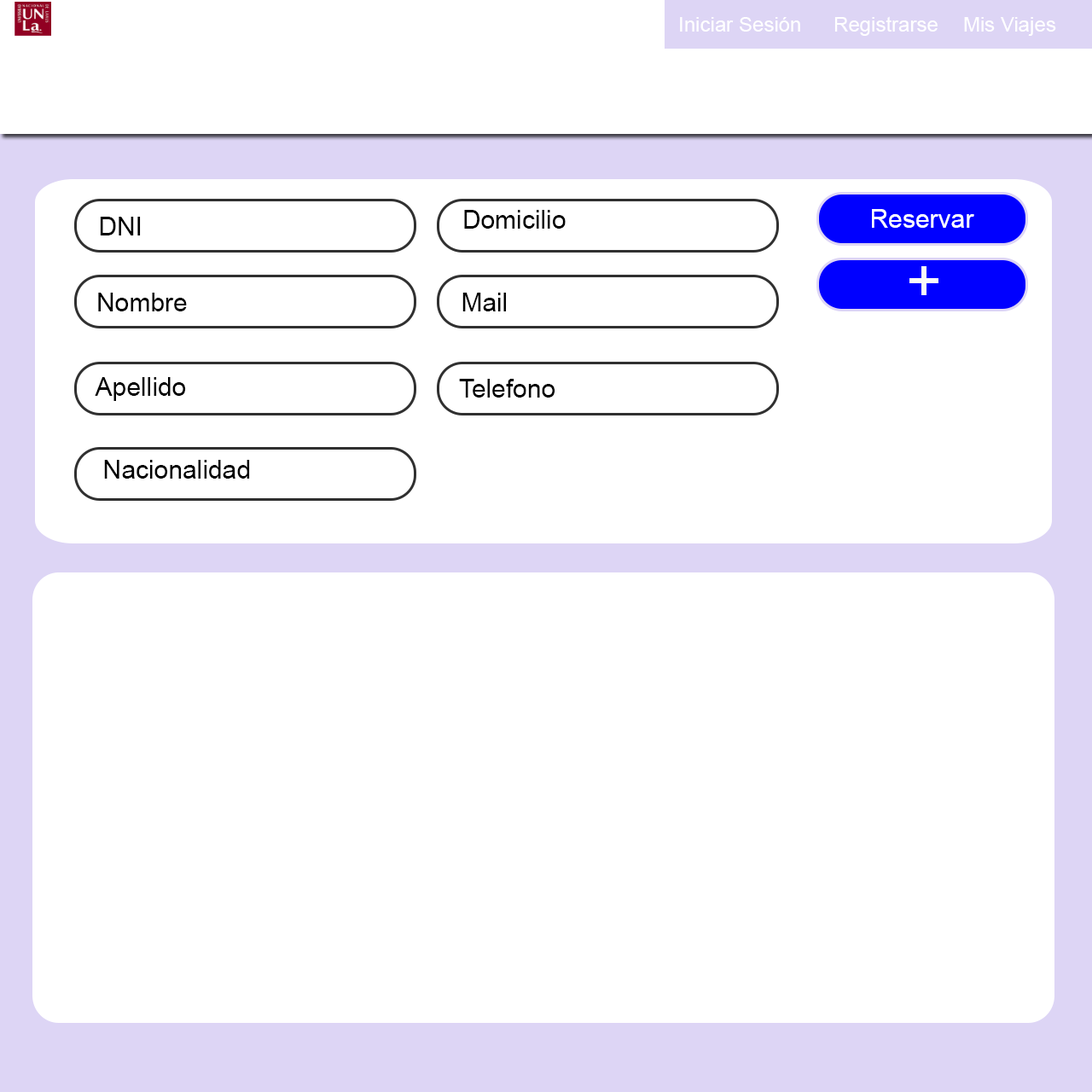
<style>
.page{position:relative;width:1092px;height:1092px;background:#ffffff}
.page>*{position:absolute;margin:0}
.t1{font:20.5px "ArialMT";color:#ffffff}
.t2{font:25.6px "ArialMT";color:#000000}
.t3{font:25.6px "ArialMT";color:#ffffff}
.t4{font:61.4px "ArialMT";color:#f9f9f9}
</style>
<div class="page">
<p class="t1" style="left:680px;top:17px;width:120px;height:15px">Iniciar Sesión</p>
<p class="t1" style="left:834px;top:16px;width:104px;height:20px">Registrarse</p>
<p class="t1" style="left:964px;top:17px;width:92px;height:19px">Mis Viajes</p>
<p class="t2" style="left:464px;top:210px;width:102px;height:19px">Domicilio</p>
<p class="t3" style="left:872px;top:209px;width:102px;height:19px">Reservar</p>
<p class="t2" style="left:100px;top:217px;width:41px;height:18px">DNI</p>
<p class="t4" style="left:909px;top:266px;width:29px;height:29px">+</p>
<p class="t2" style="left:98px;top:293px;width:89px;height:18px">Nombre</p>
<p class="t2" style="left:462px;top:293px;width:44px;height:18px">Mail</p>
<p class="t2" style="left:95px;top:377px;width:91px;height:24px">Apellido</p>
<p class="t2" style="left:459px;top:379px;width:96px;height:19px">Telefono</p>
<p class="t2" style="left:104px;top:460px;width:146px;height:19px">Nacionalidad</p>
</div>
